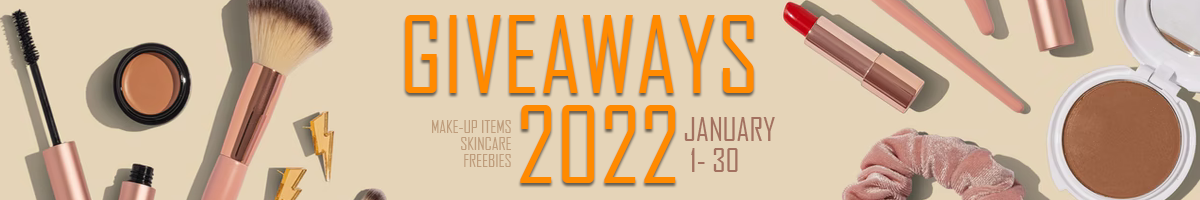
<style>
.page{position:relative;width:1200px;height:200px;background:#e5d4b8}
.page>*{position:absolute;margin:0}
.t1{font:101.8px "AgencyFB-Reg";color:#ff8a00}
.t2{font:16.8px/17px "AgencyFB-Reg";color:#be9c7b}
.t3{font:31.8px/31px "AgencyFB-Reg";color:#a37160}
</style>
<div class="page">
<p class="t1" style="left:405px;top:15px;width:349px;height:78px">GIVEAWAYS</p>
<p class="t1" style="left:520px;top:105px;width:156px;height:78px">2022</p>
<p class="t2" style="left:432px;top:120px;width:79px;height:47px;text-align:right">MAKE-UP ITEMS<br>SKINCARE<br>FREEBIES</p>
<p class="t3" style="left:684px;top:117px;width:91px;height:55px">JANUARY<br> 1- 30</p>
</div>
